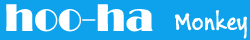
<style>
.page{position:relative;width:250px;height:40px;background:#0ea2ed}
.page>*{position:absolute;margin:0}
.t1{font:39.6px "Broadway";color:#ffffff}
.t2{font:26.9px "BuxtonSketch";color:#ffffff}
</style>
<div class="page">
<p class="t1" style="left:6px;top:4px;width:147px;height:28px">hoo-ha</p>
<p class="t2" style="left:175px;top:10px;width:72px;height:29px">Monkey</p>
</div>
